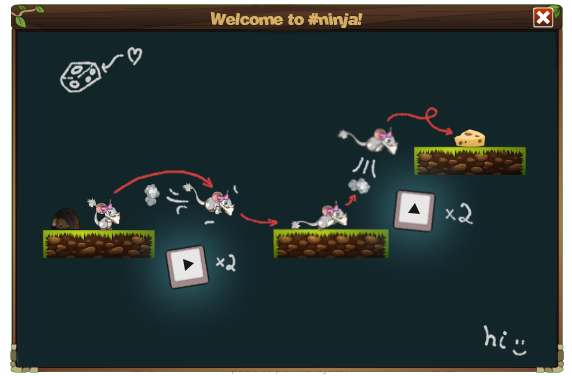
<style>
.page{position:relative;width:572px;height:376px;background:#122529}
.page>*{position:absolute;margin:0}
.t1{font:16px "Soopafresh";color:#d6ae64}
</style>
<div class="page">
<p class="t1" style="left:210px;top:12px;width:153px;height:16px">Welcome to #ninja!</p>
</div>
